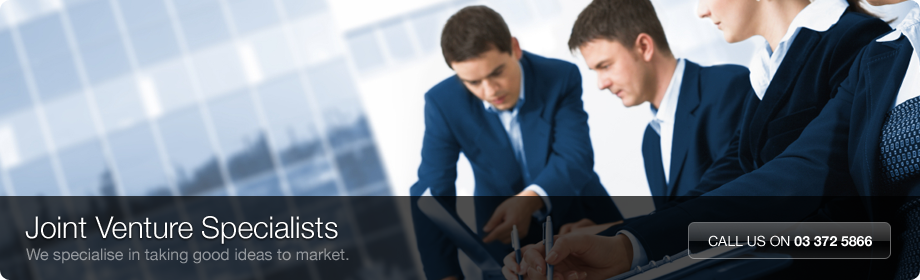
<style>
.page{position:relative;width:920px;height:280px}
.page>*{position:absolute;margin:0}
.t1{font:30px "HelveticaNeue-Light";color:#ffffff}
.t2{font:14px "HelveticaNeue-Bold";color:#ffffff;text-transform:uppercase}
.t3{font:14px "HelveticaNeue";color:#ffffff;text-transform:uppercase}
.t4{font:16px "HelveticaNeue";color:#94989d}
</style>
<div class="page">
<p class="t1" style="left:25px;top:216px;width:313px;height:28px">Joint Venture Specialists</p>
<p class="t2" style="left:708px;top:235px;width:164px;height:12px"><span class="t3">Call Us on </span>03 372 5866</p>
<p class="t4" style="left:26px;top:248px;width:323px;height:16px">We specialise in taking good ideas to market.</p>
</div>
